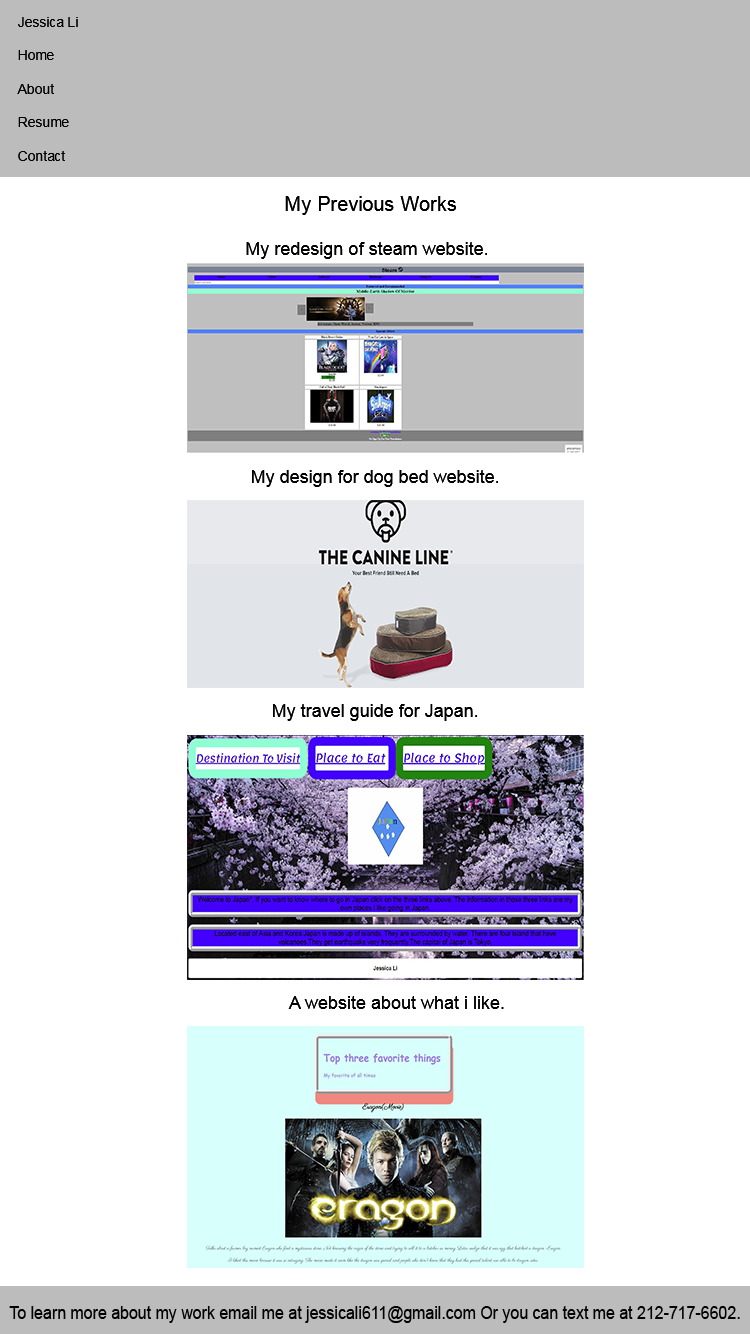
<style>
.page{position:relative;width:750px;height:1334px;background:#ffffff}
.page>*{position:absolute;margin:0}
.t1{font:14px "ArialMT";color:#000000}
.t2{font:20px "ArialMT";color:#000000}
.t3{font:18px "ArialMT";color:#000000}
.t4{font:18px "ArialMT";color:#000000;scale:0.89 1}
</style>
<div class="page">
<p class="t1" style="left:17px;top:17px;width:61px;height:144px">Jessica Li<br><br>Home<br><br>About <br><br>Resume<br><br>Contact</p>
<p class="t2" style="left:285px;top:196px;width:171px;height:19px">My Previous Works</p>
<p class="t3" style="left:246px;top:242px;width:241px;height:17px">My redesign of steam website.</p>
<p class="t3" style="left:252px;top:470px;width:246px;height:17px">My design for dog bed website.</p>
<p class="t3" style="left:273px;top:704px;width:204px;height:17px">My travel guide for Japan.</p>
<p class="t3" style="left:288px;top:996px;width:216px;height:13px">A website about what i like.</p>
<p class="t4" style="left:9px;top:1306px;width:731px;height:17px">To learn more about my work email me at jessicali611@gmail.com Or you can text me at 212-717-6602.</p>
</div>
